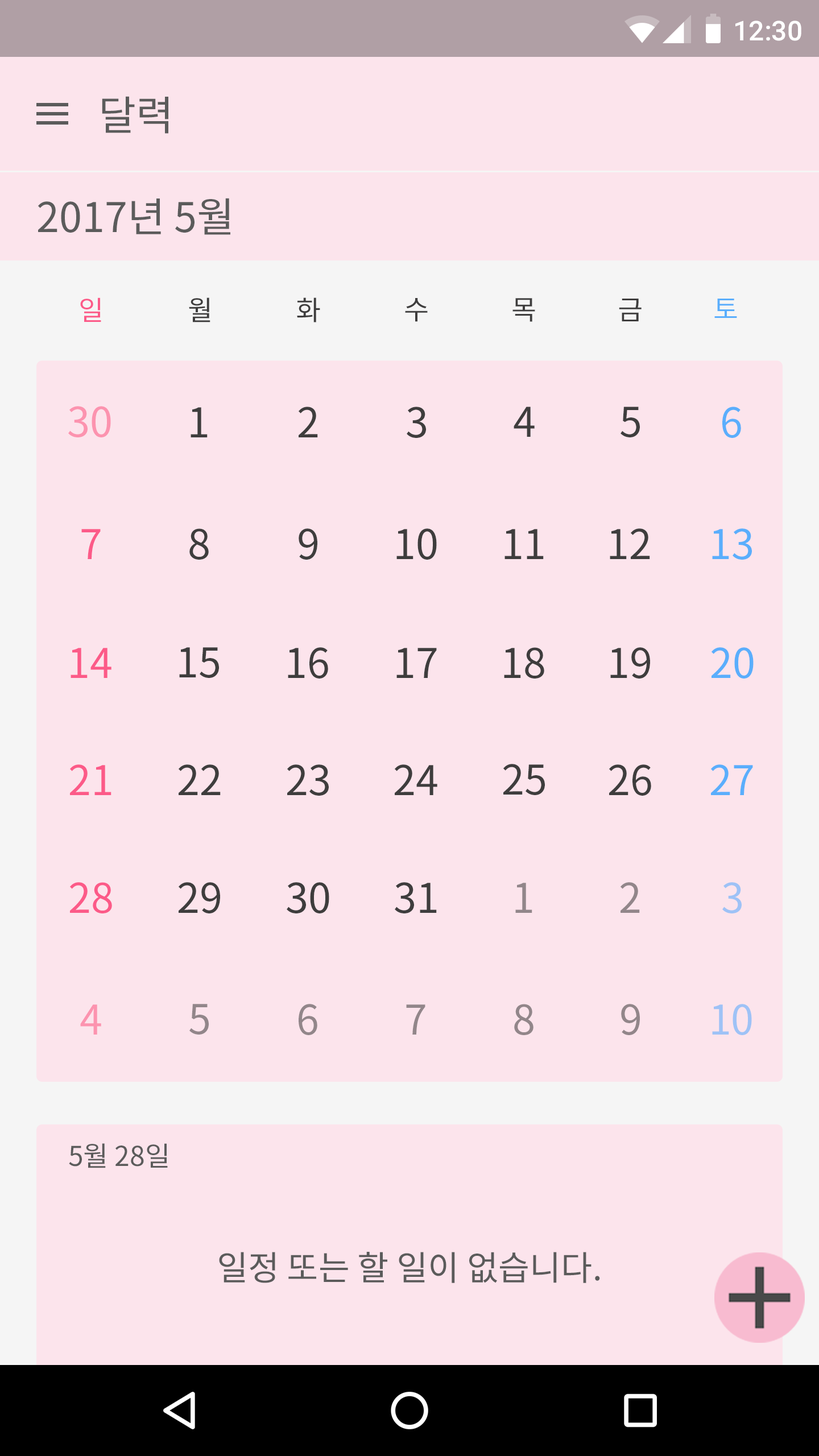
<style>
.page{position:relative;width:819px;height:1456px;background:#fce4ec}
.page>*{position:absolute;margin:0}
.t1{font:27.3px "Roboto-Medium";color:#ffffff}
.t2{font:40.9px "NotoSansCJKkr-Regular";color:#5b5b5b}
.t3{font:27.3px "NotoSansCJKkr-Regular";color:#fc5a88}
.t4{font:27.3px "NotoSansCJKkr-Regular";color:#3e3d3d}
.t5{font:27.3px "NotoSansCJKkr-Regular";color:#5aaefc}
.t6{font:40.9px "NotoSansCJKkr-Regular";color:#fc93af}
.t7{font:40.9px "NotoSansCJKkr-Regular";color:#3e3d3d}
.t8{font:40.9px "NotoSansCJKkr-Regular";color:#5aaefc}
.t9{font:40.9px "NotoSansCJKkr-Regular";color:#fc5a88}
.t10{font:40.9px "NotoSansCJKkr-Regular";color:#92868a}
.t11{font:40.9px "NotoSansCJKkr-Regular";color:#9ec2f6}
.t12{font:27.3px "NotoSansCJKkr-Regular";color:#5b5b5b}
.t13{font:34.1px "NotoSansCJKkr-Regular";color:#5b5b5b}
</style>
<div class="page">
<p class="t1" style="left:735px;top:20px;width:66px;height:21px">12:30</p>
<p class="t2" style="left:102px;top:96px;width:66px;height:38px">달력</p>
<p class="t2" style="left:38px;top:198px;width:192px;height:37px">2017년 5월</p>
<p class="t3" style="left:80px;top:297px;width:21px;height:25px">일</p>
<p class="t4" style="left:189px;top:297px;width:21px;height:25px">월</p>
<p class="t4" style="left:297px;top:297px;width:23px;height:25px">화</p>
<p class="t4" style="left:405px;top:298px;width:23px;height:24px">수</p>
<p class="t4" style="left:512px;top:298px;width:23px;height:24px">목</p>
<p class="t4" style="left:619px;top:299px;width:23px;height:22px">금</p>
<p class="t5" style="left:714px;top:299px;width:23px;height:19px">토</p>
<p class="t6" style="left:68px;top:406px;width:43px;height:31px">30</p>
<p class="t7" style="left:191px;top:407px;width:17px;height:30px">1</p>
<p class="t7" style="left:298px;top:407px;width:20px;height:30px">2</p>
<p class="t7" style="left:407px;top:407px;width:19px;height:31px">3</p>
<p class="t7" style="left:514px;top:407px;width:21px;height:30px">4</p>
<p class="t7" style="left:620px;top:407px;width:20px;height:30px">5</p>
<p class="t8" style="left:722px;top:407px;width:19px;height:31px">６</p>
<p class="t9" style="left:81px;top:529px;width:20px;height:30px">7</p>
<p class="t7" style="left:189px;top:528px;width:20px;height:32px">8</p>
<p class="t7" style="left:299px;top:528px;width:18px;height:32px">9</p>
<p class="t7" style="left:396px;top:528px;width:41px;height:32px">10</p>
<p class="t7" style="left:504px;top:529px;width:40px;height:30px">11</p>
<p class="t7" style="left:610px;top:528px;width:40px;height:31px">12</p>
<p class="t8" style="left:712px;top:528px;width:40px;height:32px">13</p>
<p class="t9" style="left:71px;top:648px;width:40px;height:30px">14</p>
<p class="t7" style="left:179px;top:647px;width:40px;height:31px">15</p>
<p class="t7" style="left:288px;top:647px;width:40px;height:32px">16</p>
<p class="t7" style="left:396px;top:648px;width:41px;height:30px">17</p>
<p class="t7" style="left:504px;top:647px;width:40px;height:32px">18</p>
<p class="t7" style="left:610px;top:647px;width:40px;height:32px">19</p>
<p class="t8" style="left:711px;top:647px;width:43px;height:32px">20</p>
<p class="t9" style="left:69px;top:764px;width:42px;height:31px">21</p>
<p class="t7" style="left:178px;top:764px;width:43px;height:31px">22</p>
<p class="t7" style="left:287px;top:764px;width:42px;height:32px">23</p>
<p class="t7" style="left:394px;top:764px;width:43px;height:31px">24</p>
<p class="t7" style="left:503px;top:764px;width:42px;height:31px">25</p>
<p class="t7" style="left:609px;top:764px;width:42px;height:32px">26</p>
<p class="t8" style="left:710px;top:764px;width:43px;height:31px">27</p>
<p class="t9" style="left:69px;top:882px;width:43px;height:31px">２8</p>
<p class="t7" style="left:178px;top:882px;width:42px;height:31px">29</p>
<p class="t7" style="left:287px;top:882px;width:42px;height:31px">30</p>
<p class="t7" style="left:395px;top:882px;width:42px;height:31px">３1</p>
<p class="t10" style="left:515px;top:883px;width:17px;height:30px">1</p>
<p class="t10" style="left:620px;top:882px;width:20px;height:31px">2</p>
<p class="t11" style="left:722px;top:882px;width:20px;height:31px">3</p>
<p class="t6" style="left:80px;top:1004px;width:21px;height:31px">4</p>
<p class="t10" style="left:189px;top:1004px;width:20px;height:31px">5</p>
<p class="t10" style="left:299px;top:1004px;width:18px;height:31px">6</p>
<p class="t10" style="left:406px;top:1004px;width:19px;height:31px">7</p>
<p class="t10" style="left:514px;top:1004px;width:19px;height:31px">8</p>
<p class="t10" style="left:621px;top:1004px;width:19px;height:31px">9</p>
<p class="t11" style="left:712px;top:1004px;width:40px;height:31px">10</p>
<p class="t12" style="left:69px;top:1143px;width:99px;height:25px">5월 28일</p>
<p class="t13" style="left:219px;top:1252px;width:381px;height:31px">일정 또는 할 일이 없습니다.</p>
</div>
